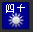
<style>
.page{position:relative;width:33px;height:32px;background:#000090}
.page>*{position:absolute;margin:0}
.t1{font:10.4px "SimSun";color:#ffffff}
</style>
<div class="page">
<p class="t1" style="left:6px;top:4px;width:19px;height:9px">四十</p>
</div>
